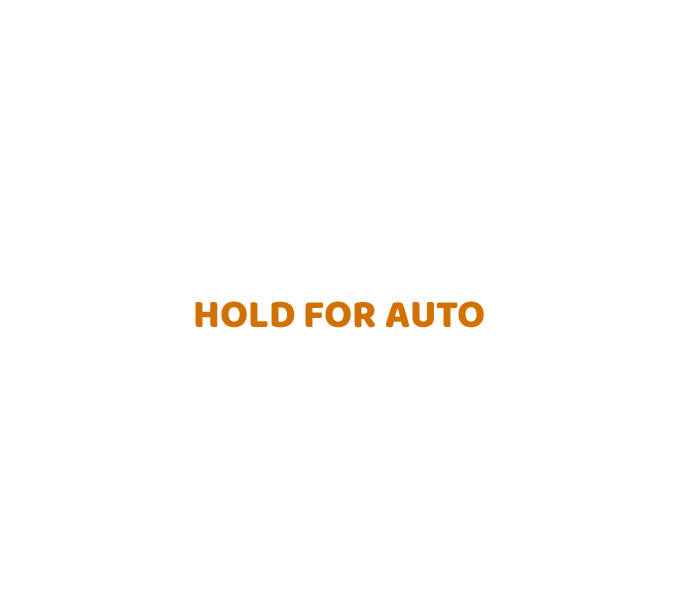
<style>
.page{position:relative;width:680px;height:605px;background:#ffffff}
.page>*{position:absolute;margin:0}
.t1{font:40px "Baloo2-ExtraBold";color:#d17200}
</style>
<div class="page">
<p class="t1" style="left:195px;top:301px;width:289px;height:27px">HOLD FOR AUTO</p>
</div>
